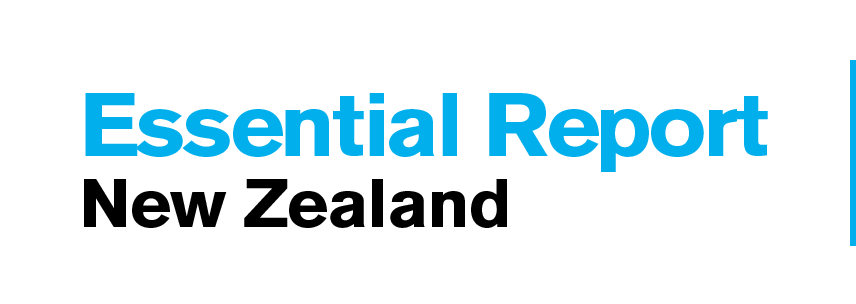
<style>
.page{position:relative;width:856px;height:304px;background:#ffffff}
.page>*{position:absolute;margin:0}
.t1{font:88.7px "AkzidenzGroteskBE-Bold";letter-spacing:-0.04em;color:#00afec;scale:1.06 1}
.t2{font:88.7px "AkzidenzGroteskBE-Bold";letter-spacing:-0.02em;color:#00afec;scale:1.06 1}
.t3{font:88.7px "AkzidenzGroteskBE-Bold";letter-spacing:-0.06em;color:#00afec;scale:1.06 1}
.t4{font:67.4px "AkzidenzGroteskBE-Bold";letter-spacing:-0.02em;color:#000000;scale:1.06 1}
</style>
<div class="page">
<p class="t1" style="left:85px;top:93px;width:683px;height:79px">E<span class="t2">ss</span><span class="t3">e</span>n<span class="t2">t</span><span class="t3">i</span>al R<span class="t3">e</span>po<span class="t2">r</span>t</p>
<p class="t4" style="left:84px;top:179px;width:423px;height:49px">New Zealand</p>
</div>
